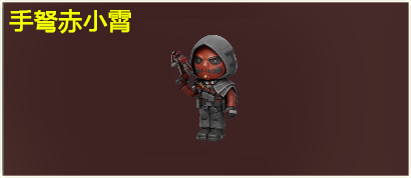
<style>
.page{position:relative;width:411px;height:178px}
.page>*{position:absolute;margin:0}
.t1{font:24px "MicrosoftYaHeiUI";color:#f4ff00;font-weight:bold}
</style>
<div class="page">
<p class="t1" style="left:9px;top:9px;width:122px;height:25px">手弩赤小霄</p>
</div>
